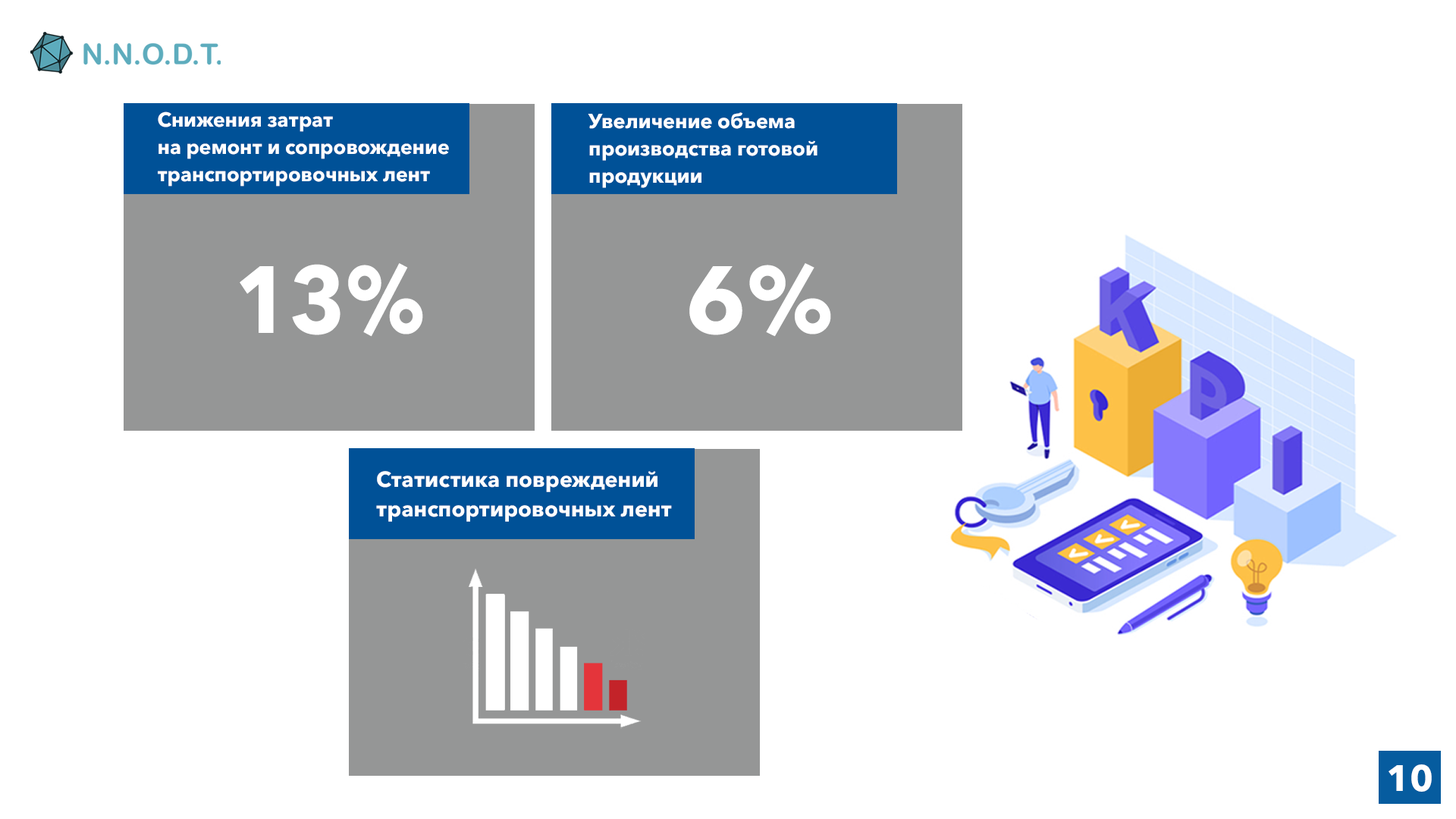
<style>
.page{position:relative;width:1456px;height:819px;background:#ffffff}
.page>*{position:absolute;margin:0}
.t1{font:20px/26.9px "AvenirNextCyr-Bold";color:#ffffff}
.t2{font:20.2px/27.2px "AvenirNextCyr-Bold";color:#ffffff}
.t3{font:94px "AvenirNextCyr-Bold";color:#ffffff;scale:0.92 1}
.t4{font:94px "AvenirNextCyr-Bold";color:#ffffff}
.t5{font:21.7px/29.1px "AvenirNextCyr-Bold";color:#ffffff}
.t6{font:36.4px "AvenirNextCyr-Bold";color:#ffffff}
</style>
<div class="page">
<p class="t1" style="left:158px;top:111px;width:291px;height:76px">Снижения затрат<br>на ремонт и сопровождение<br>транспортировочных лент</p>
<p class="t2" style="left:588px;top:112px;width:229px;height:76px">Увеличение объема<br>производства готовой<br>продукции</p>
<p class="t3" style="left:240px;top:263px;width:183px;height:74px">13%</p>
<p class="t4" style="left:689px;top:263px;width:142px;height:74px">6%</p>
<p class="t5" style="left:376px;top:471px;width:296px;height:51px">Статистика повреждений<br>транспортировочных лент</p>
<p class="t6" style="left:1388px;top:764px;width:44px;height:28px">10</p>
</div>
